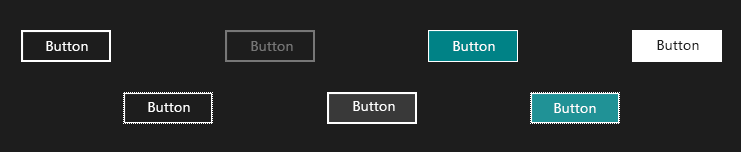
<style>
.page{position:relative;width:741px;height:152px;background:#1d1d1d}
.page>*{position:absolute;margin:0}
.t1{font:14px "SegoeUI";letter-spacing:0.02em;color:#ffffff}
.t2{font:14px "SegoeUI";letter-spacing:0.02em;color:#767676}
.t3{font:14px "SegoeUI";letter-spacing:0.02em;color:#1d1d1d}
</style>
<div class="page">
<p class="t1" style="left:46px;top:41px;width:42px;height:10px">Button</p>
<p class="t2" style="left:251px;top:41px;width:42px;height:10px">Button</p>
<p class="t1" style="left:453px;top:41px;width:42px;height:10px">Button</p>
<p class="t3" style="left:657px;top:40px;width:42px;height:10px">Button</p>
<p class="t1" style="left:148px;top:102px;width:42px;height:10px">Button</p>
<p class="t1" style="left:353px;top:101px;width:42px;height:10px">Button</p>
<p class="t1" style="left:554px;top:103px;width:42px;height:10px">Button</p>
</div>
